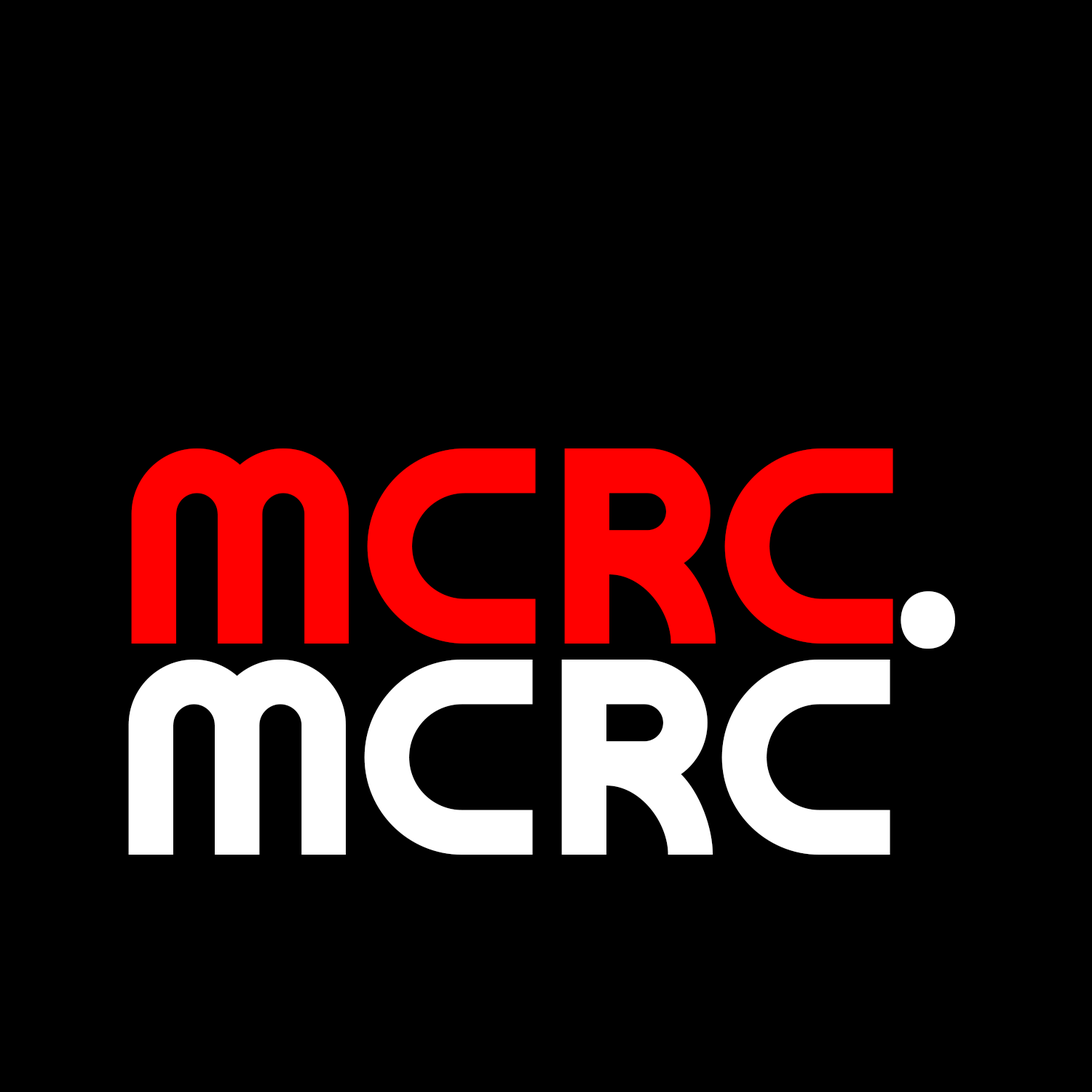
<style>
.page{position:relative;width:1092px;height:1092px;background:#000000}
.page>*{position:absolute;margin:0}
.t1{font:455px "MoonetDEMO-Regular";color:#ff0000}
.t2{font:455px "MyriadPro-Regular";color:#ffffff}
.t3{font:455px "MoonetDEMO-Regular";color:#ffffff}
</style>
<div class="page">
<p class="t1" style="left:131px;top:448px;width:218px;height:196px">M</p>
<p class="t1" style="left:367px;top:448px;width:169px;height:196px">C</p>
<p class="t1" style="left:564px;top:448px;width:152px;height:196px">R</p>
<p class="t1" style="left:724px;top:448px;width:169px;height:196px">C</p>
<p class="t2" style="left:901px;top:591px;width:54px;height:58px">.</p>
<p class="t3" style="left:128px;top:660px;width:218px;height:195px">M</p>
<p class="t3" style="left:364px;top:660px;width:169px;height:195px">C</p>
<p class="t3" style="left:561px;top:660px;width:152px;height:195px">R</p>
<p class="t3" style="left:721px;top:660px;width:169px;height:195px">C</p>
</div>
